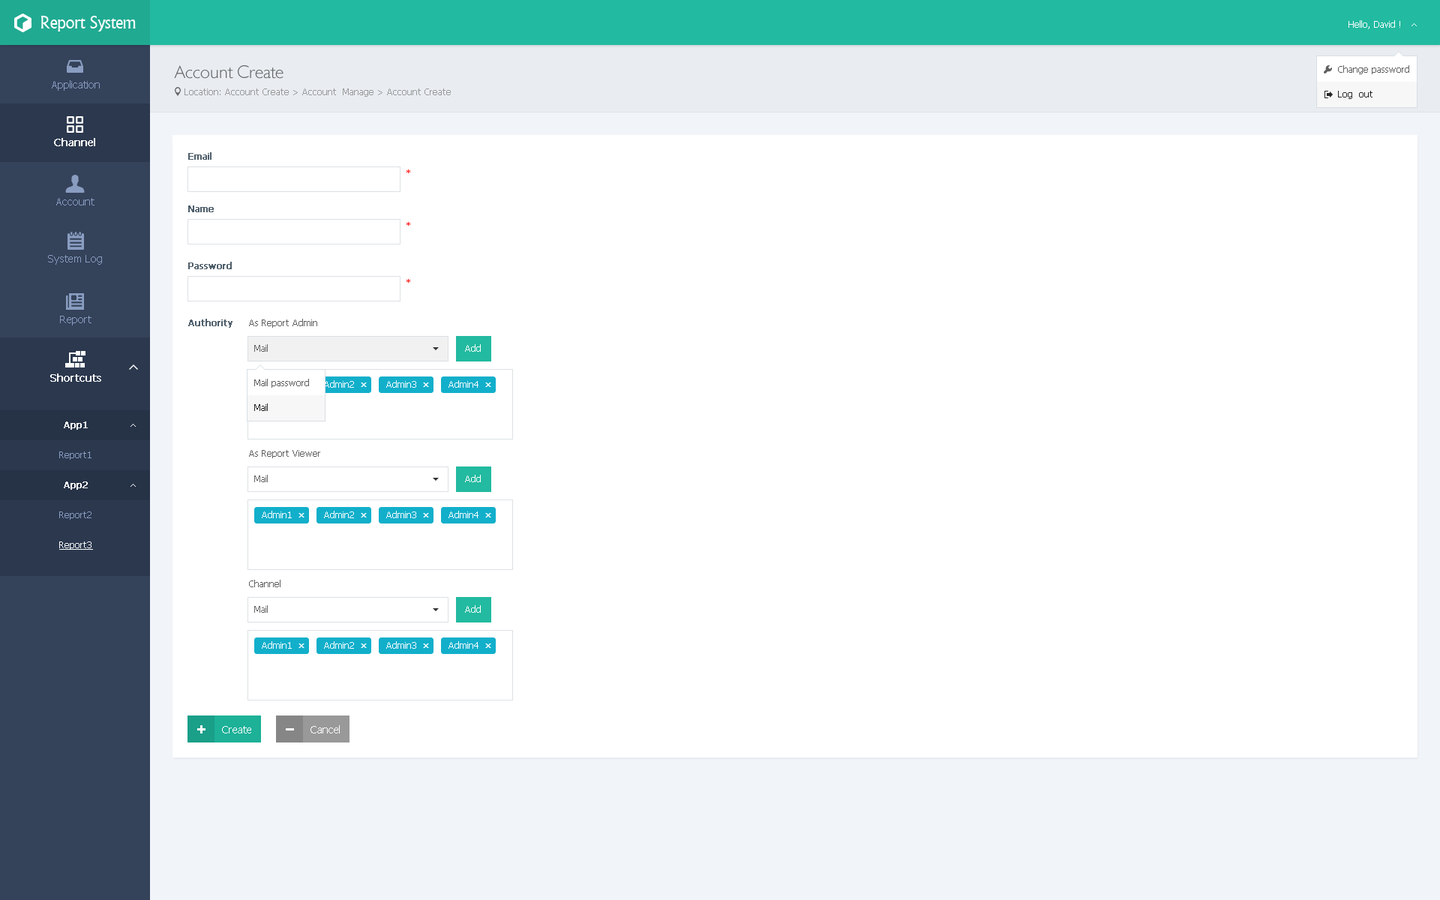
<style>
.page{position:relative;width:1440px;height:900px;background:#ffffff}
.page>*{position:absolute;margin:0}
.t1{font:18px "Narkisim";letter-spacing:-0.022em;color:#ffffff}
.t2{font:9px "Tahoma";color:#ffffff}
.t3{font:18px "084-CAI978";color:#666666}
.t4{font:9px "Tahoma";color:#5f5f5f}
.t5{font:10.5px "Tahoma";color:#899dc1}
.t6{font:9px "Tahoma";color:#999999}
.t7{font:9px "Tahoma";color:#262626}
.t8{font:10.5px "Tahoma";color:#ffffff;font-weight:bold}
.t9{font:9px "Tahoma";color:#4e5e6a;font-weight:bold}
.t10{font:9px "Tahoma";color:#ff0000}
.t11{font:9px "Tahoma";color:#666666}
.t12{font:9px "Tahoma";color:#ffffff;font-weight:bold}
.t13{font:9px "Tahoma";color:#899dc1}
.t14{font:9px "Tahoma";color:#ffffff;text-decoration:underline}
.t15{font:10.5px "Tahoma";color:#ffffff}
</style>
<div class="page">
<p class="t1" style="left:40px;top:16px;width:96px;height:16px">Report System</p>
<p class="t2" style="left:1348px;top:20px;width:52px;height:9px">Hello, David !</p>
<p class="t3" style="left:174px;top:65px;width:110px;height:14px">Account Create</p>
<p class="t4" style="left:1338px;top:65px;width:71px;height:9px">Change password</p>
<p class="t5" style="left:52px;top:80px;width:48px;height:11px">Application</p>
<p class="t6" style="left:184px;top:88px;width:267px;height:9px">Location: Account Create &gt; Account  Manage &gt; Account Create</p>
<p class="t7" style="left:1338px;top:91px;width:34px;height:8px">Log  out</p>
<p class="t8" style="left:54px;top:138px;width:41px;height:8px">Channel</p>
<p class="t9" style="left:188px;top:152px;width:24px;height:8px">Email</p>
<p class="t10" style="left:406px;top:170px;width:4px;height:3px">*</p>
<p class="t5" style="left:56px;top:198px;width:38px;height:8px">Account</p>
<p class="t9" style="left:188px;top:206px;width:26px;height:6px">Name</p>
<p class="t10" style="left:406px;top:222px;width:4px;height:4px">*</p>
<p class="t5" style="left:48px;top:255px;width:54px;height:10px">System Log</p>
<p class="t9" style="left:188px;top:262px;width:44px;height:7px">Password</p>
<p class="t10" style="left:406px;top:279px;width:4px;height:4px">*</p>
<p class="t5" style="left:60px;top:316px;width:32px;height:10px">Report</p>
<p class="t9" style="left:188px;top:319px;width:44px;height:9px">Authority</p>
<p class="t4" style="left:249px;top:319px;width:68px;height:9px">As Report Admin</p>
<p class="t11" style="left:254px;top:344px;width:14px;height:8px">Mail</p>
<p class="t2" style="left:465px;top:344px;width:16px;height:8px">Add</p>
<p class="t8" style="left:50px;top:374px;width:51px;height:8px">Shortcuts</p>
<p class="t4" style="left:254px;top:379px;width:55px;height:9px">Mail password</p>
<p class="t2" style="left:324px;top:380px;width:30px;height:8px">Admin2</p>
<p class="t2" style="left:386px;top:380px;width:30px;height:8px">Admin3</p>
<p class="t2" style="left:448px;top:380px;width:30px;height:8px">Admin4</p>
<p class="t7" style="left:254px;top:404px;width:14px;height:7px">Mail</p>
<p class="t12" style="left:64px;top:422px;width:24px;height:8px">App1</p>
<p class="t13" style="left:59px;top:452px;width:33px;height:8px">Report1</p>
<p class="t4" style="left:249px;top:450px;width:71px;height:8px">As Report Viewer</p>
<p class="t12" style="left:64px;top:482px;width:24px;height:8px">App2</p>
<p class="t11" style="left:254px;top:475px;width:14px;height:7px">Mail</p>
<p class="t2" style="left:465px;top:475px;width:16px;height:7px">Add</p>
<p class="t13" style="left:59px;top:512px;width:33px;height:8px">Report2</p>
<p class="t2" style="left:262px;top:511px;width:30px;height:7px">Admin1</p>
<p class="t2" style="left:324px;top:511px;width:30px;height:7px">Admin2</p>
<p class="t2" style="left:386px;top:511px;width:30px;height:7px">Admin3</p>
<p class="t2" style="left:448px;top:511px;width:30px;height:7px">Admin4</p>
<p class="t14" style="left:59px;top:542px;width:34px;height:8px">Report3</p>
<p class="t4" style="left:249px;top:580px;width:31px;height:7px">Channel</p>
<p class="t11" style="left:254px;top:605px;width:14px;height:8px">Mail</p>
<p class="t2" style="left:465px;top:605px;width:16px;height:8px">Add</p>
<p class="t2" style="left:262px;top:641px;width:30px;height:8px">Admin1</p>
<p class="t2" style="left:324px;top:641px;width:30px;height:8px">Admin2</p>
<p class="t2" style="left:386px;top:641px;width:30px;height:8px">Admin3</p>
<p class="t2" style="left:448px;top:641px;width:30px;height:8px">Admin4</p>
<p class="t15" style="left:222px;top:726px;width:29px;height:8px">Create</p>
<p class="t15" style="left:310px;top:725px;width:30px;height:9px">Cancel</p>
</div>
